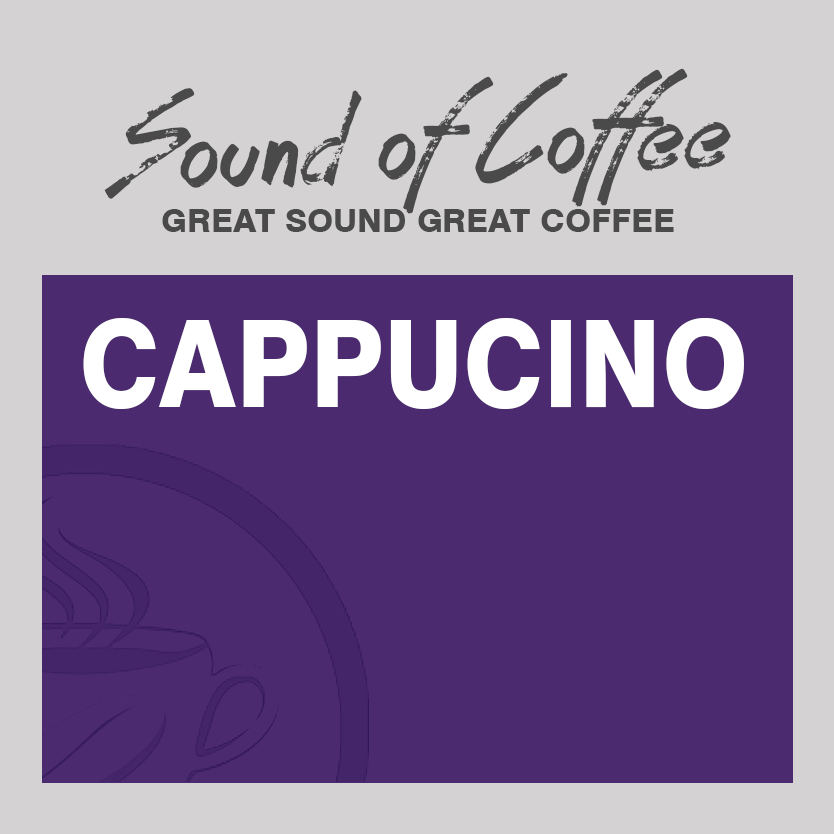
<style>
.page{position:relative;width:834px;height:834px;background:#4b2a6f}
.page>*{position:absolute;margin:0}
.t1{font:128px "CoffeeHouse";color:#4a4a4a}
.t2{font:32px "Swiss721BT-Heavy";color:#4a4a4a}
.t3{font:120.4px "Swiss721BT-Heavy";color:#ffffff;scale:0.89 1}
</style>
<div class="page">
<p class="t1" style="left:104px;top:68px;width:627px;height:146px;rotate:-2deg">Sound of Coffee</p>
<p class="t2" style="left:162px;top:209px;width:512px;height:23px">GREAT SOUND GREAT COFFEE</p>
<p class="t3" style="left:83px;top:318px;width:661px;height:91px">CAPPUCINO</p>
</div>
